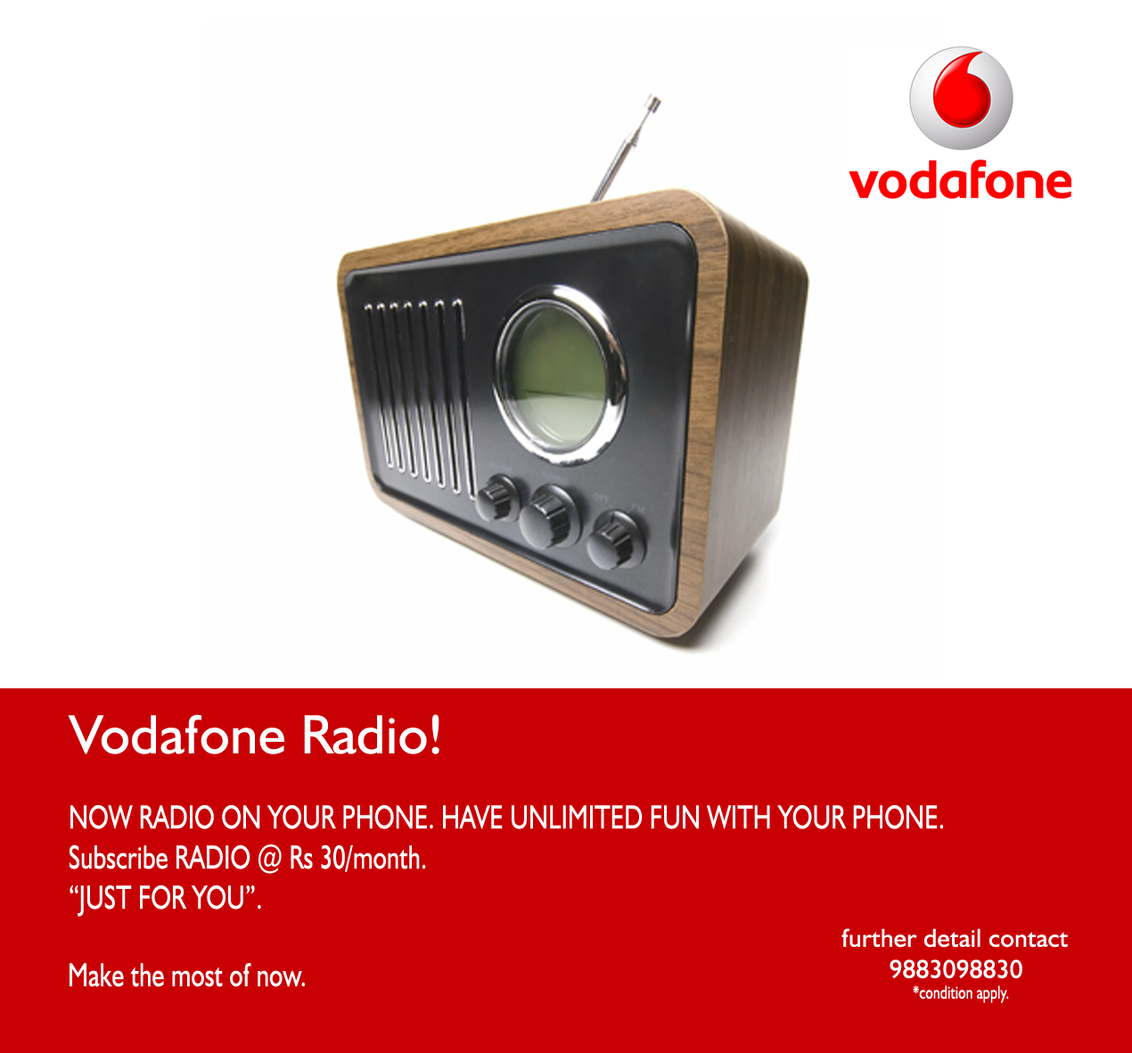
<style>
.page{position:relative;width:1132px;height:1053px;background:#c80003}
.page>*{position:absolute;margin:0}
.t1{font:55.7px "Humanist521BT-Roman";letter-spacing:0.01em;color:#fefefe}
.t2{font:33.4px "Humanist521BT-Roman";letter-spacing:0.01em;color:#fefefe;scale:0.75 1}
.t3{font:26px "Humanist521BT-Roman";letter-spacing:0.01em;color:#fefefe}
.t4{font:18.6px "Humanist521BT-Roman";letter-spacing:0.01em;color:#fefefe;scale:0.75 1}
</style>
<div class="page">
<p class="t1" style="left:68px;top:714px;width:372px;height:40px">Vodafone Radio!</p>
<p class="t2" style="left:70px;top:805px;width:874px;height:112px;text-align:justify">NOW RADIO ON YOUR PHONE. HAVE UNLIMITED FUN WITH YOUR PHONE.<br>Subscribe RADIO @ Rs 30/month. <br>“JUST FOR YOU”.</p>
<p class="t3" style="left:842px;top:928px;width:226px;height:51px;text-align:justify">further detail contact<br>       9883098830</p>
<p class="t2" style="left:70px;top:963px;width:235px;height:24px">Make the most of now.</p>
<p class="t4" style="left:913px;top:985px;width:96px;height:18px">*condition apply.</p>
</div>
